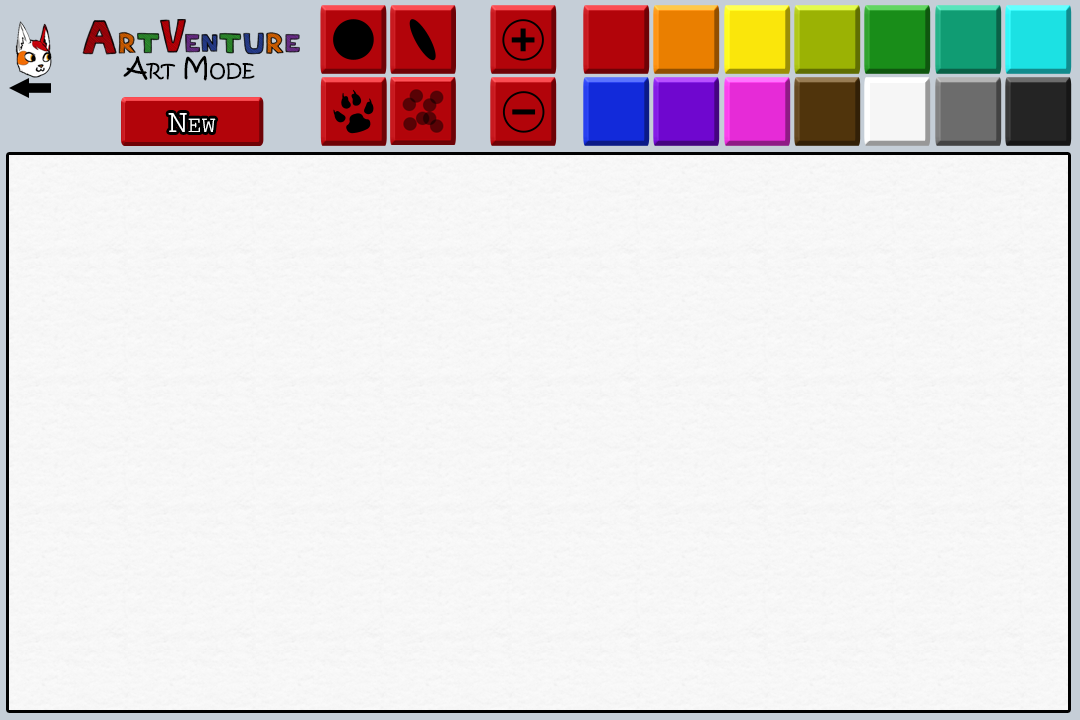
<style>
.page{position:relative;width:1080px;height:720px}
.page>*{position:absolute;margin:0}
.t1{font:25.7px "KristenITC-Regular";color:#000000;font-variant:small-caps}
.t2{font:33px "CourierNewPSMT";color:#ffffff;font-variant:small-caps}
</style>
<div class="page">
<p class="t1" style="left:123px;top:55px;width:132px;height:26px">Art Mode</p>
<p class="t2" style="left:168px;top:113px;width:48px;height:19px">New</p>
</div>
